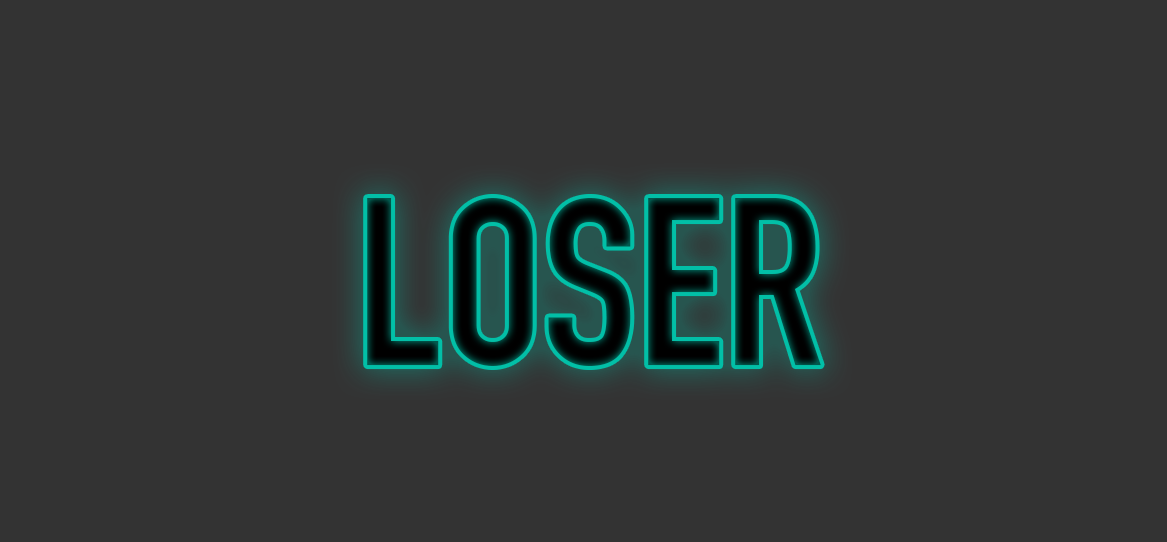
<style>
.page{position:relative;width:1167px;height:542px;background:#333333}
.page>*{position:absolute;margin:0}
.t1{font:233.7px "DINEngschrift";text-transform:uppercase}
</style>
<div class="page">
<p class="t1" style="left:367px;top:198px;width:454px;height:168px">loser</p>
</div>
